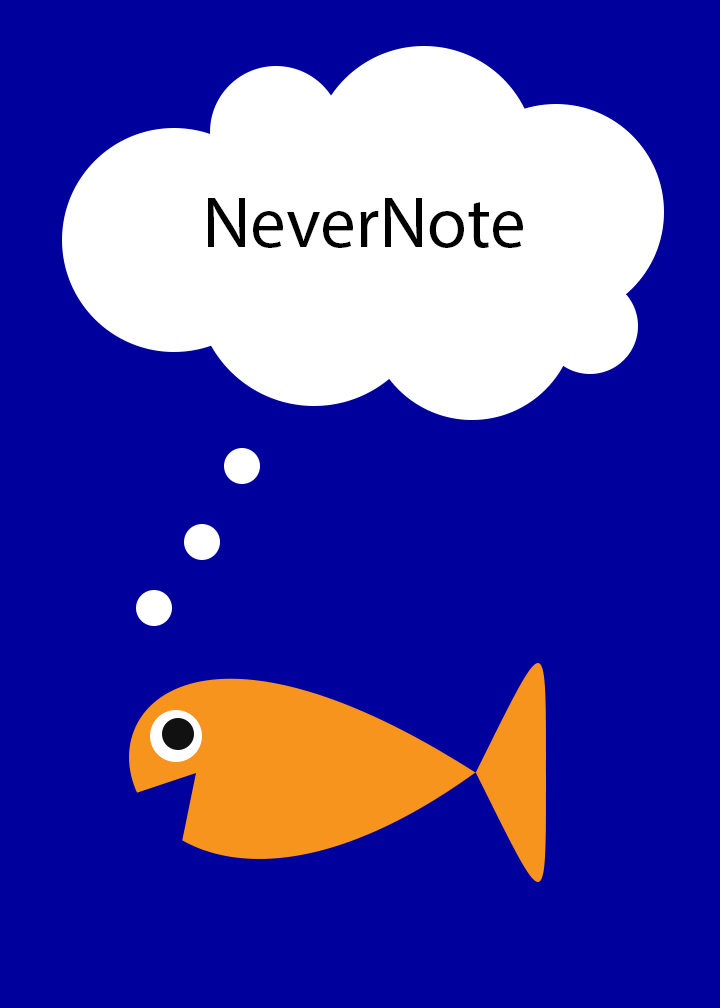
<style>
.page{position:relative;width:720px;height:1008px;background:#00009d}
.page>*{position:absolute;margin:0}
.t1{font:72px "MyriadPro-Regular";color:#000000}
</style>
<div class="page">
<p class="t1" style="left:208px;top:198px;width:315px;height:50px">NeverNote</p>
</div>
